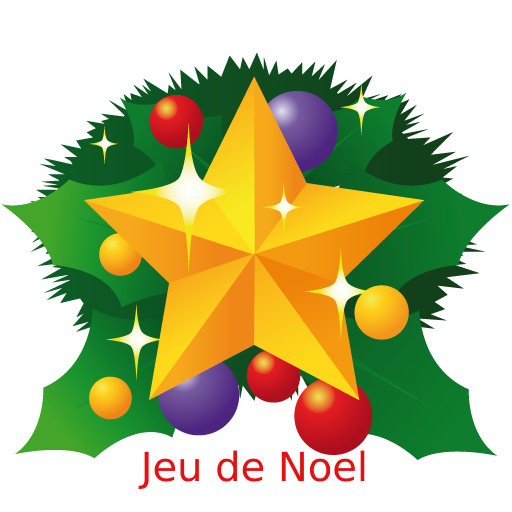
<style>
.page{position:relative;width:512px;height:512px;background:#ffffff}
.page>*{position:absolute;margin:0}
.t1{font:40px "DejaVuSans";color:#e61010}
</style>
<div class="page">
<p class="t1" style="left:138px;top:450px;width:227px;height:40px">Jeu de Noel</p>
</div>
